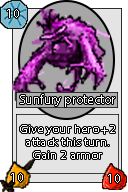
<style>
.page{position:relative;width:128px;height:192px;background:#e4e4e4}
.page>*{position:absolute;margin:0}
.t1{font:13.1px "MyriadPro-Regular";color:#ffffff}
.t2{font:11px "MyriadPro-Regular";color:#fefefe;scale:1.19 1}
</style>
<div class="page">
<p class="t1" style="left:7px;top:9px;width:12px;height:9px">10</p>
<p class="t1" style="left:20px;top:94px;width:95px;height:13px">Sunfury protector</p>
<p class="t2" style="left:20px;top:125px;width:95px;height:34px;text-align:center">Give your hero +2 attack this turn. Gain 2 armor</p>
<p class="t1" style="left:11px;top:173px;width:12px;height:9px">10</p>
<p class="t1" style="left:108px;top:174px;width:12px;height:9px">10</p>
</div>
